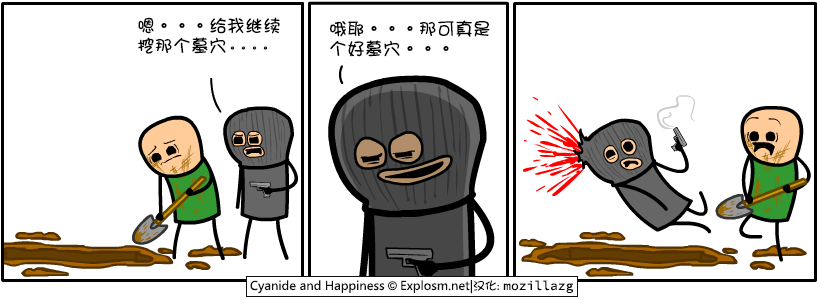
<style>
.page{position:relative;width:820px;height:300px;background:#ffffff}
.page>*{position:absolute;margin:0}
.t1{font:18px/20px "DFGirl";color:#000000}
.t2{font:11px/17px "DFGirl";color:#000000}
</style>
<div class="page">
<p class="t1" style="left:138px;top:17px;width:142px;height:37px">嗯。。。给我继续<br>挖那个墓穴<span class="t2">。。。。</span></p>
<p class="t1" style="left:330px;top:20px;width:160px;height:37px">哦耶。。。那可真是<br>个好墓穴。。。</p>
</div>
